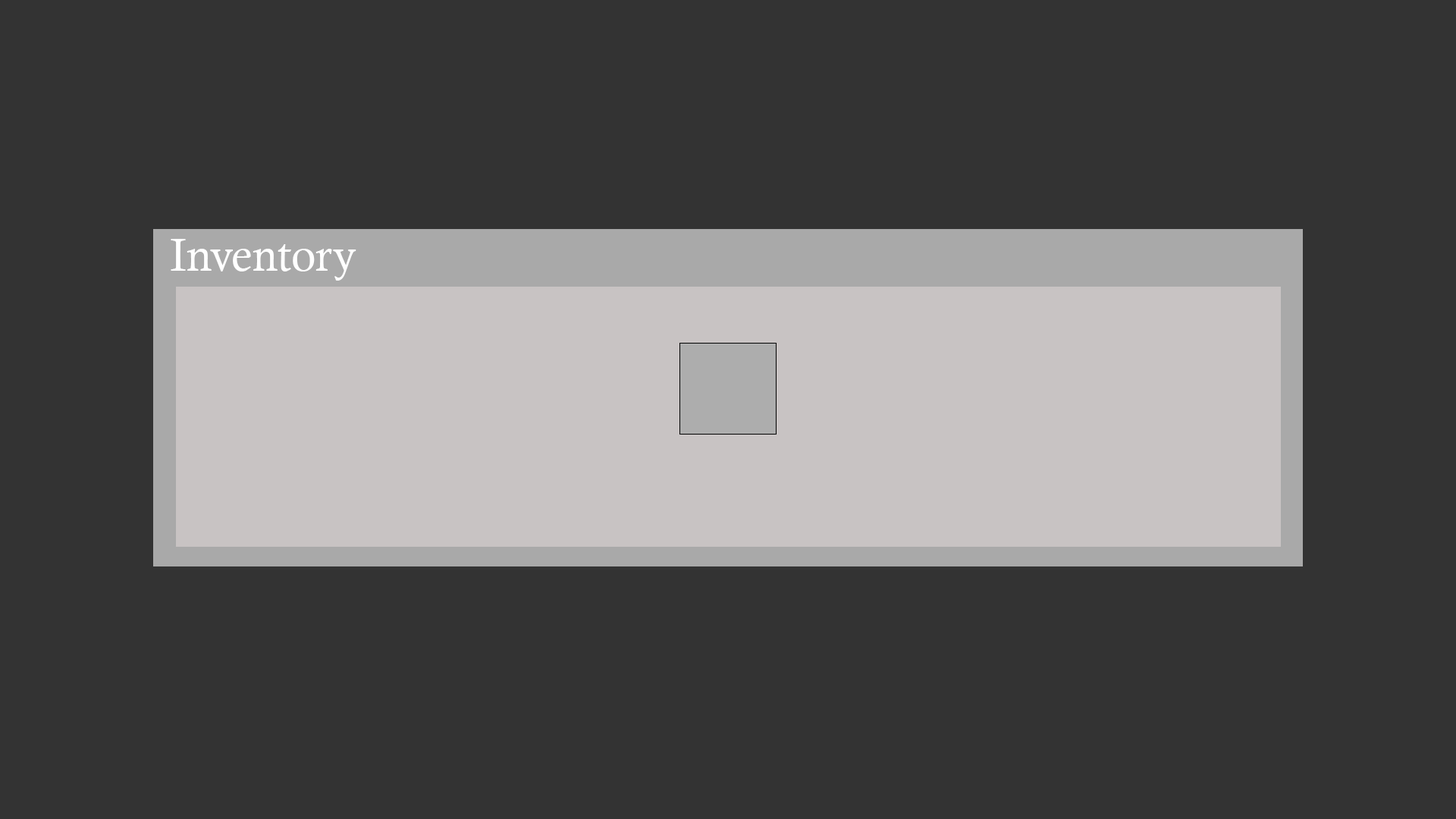
<style>
.page{position:relative;width:1456px;height:819px;background:#333333}
.page>*{position:absolute;margin:0}
.t1{font:45.5px "CalistoMT";color:#ffffff}
</style>
<div class="page">
<p class="t1" style="left:171px;top:239px;width:185px;height:42px">Inventory</p>
</div>
